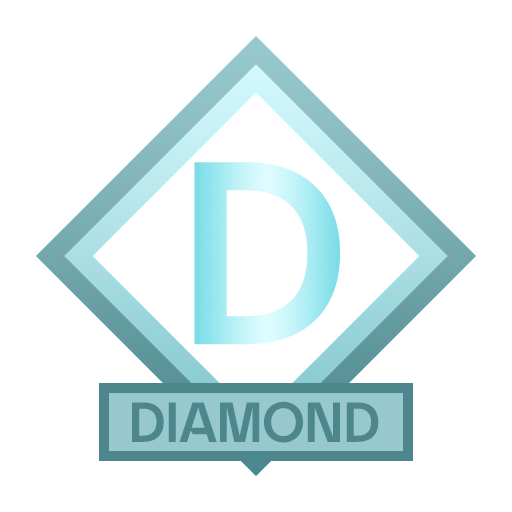
<style>
.page{position:relative;width:512px;height:512px;background:#ffffff}
.page>*{position:absolute;margin:0}
.t1{font:231.8px "yspotlight-regular"}
.t2{font:50px "yspotlight-regular";color:#4d878d}
</style>
<div class="page">
<p class="t1" style="left:194px;top:162px;width:146px;height:183px">D</p>
<p class="t2" style="left:132px;top:401px;width:247px;height:42px">DIAMOND</p>
</div>
